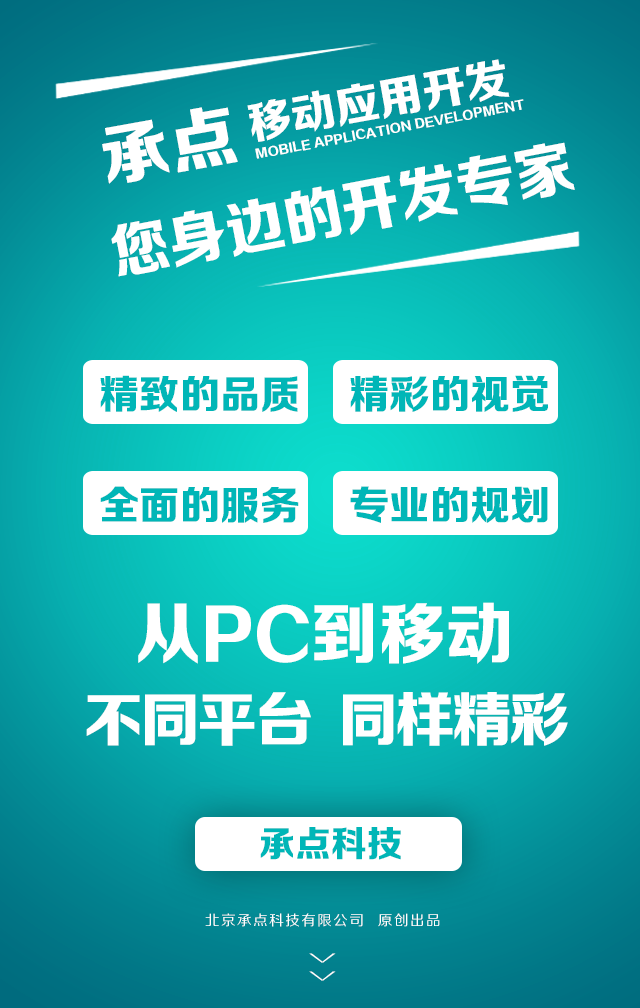
<style>
.page{position:relative;width:640px;height:1008px}
.page>*{position:absolute;margin:0}
.t1{font:43.9px "FZZDHJW--GB1-0";letter-spacing:0.005em;color:#ffffff;text-transform:uppercase}
.t2{font:12px "FZZDHJW--GB1-0";letter-spacing:0.005em;color:#ffffff;text-transform:uppercase}
.t3{font:67.7px "FZZDHJW--GB1-0";letter-spacing:0.005em;color:#ffffff;text-transform:uppercase}
.t4{font:59.4px "FZZDHJW--GB1-0";letter-spacing:0.005em;color:#ffffff;text-transform:uppercase}
.t5{font:40px "FZZDHJW--GB1-0";color:#00b6b7;text-transform:uppercase}
.t6{font:66.9px "FZZDHJW--GB1-0";color:#ffffff;text-transform:uppercase}
.t7{font:59.4px "FZZDHJW--GB1-0";letter-spacing:-0.05em;color:#ffffff;text-transform:uppercase}
.t8{font:36px "FZZDHJW--GB1-0";letter-spacing:0.005em;color:#00b6b7;text-transform:uppercase}
.t9{font:14.2px "FZZHJW--GB1-0";letter-spacing:0.1em;color:#ffffff;text-transform:uppercase}
.t10{font:36.8px "FZZXHJW--GB1-0";letter-spacing:0.5em;color:#ffffff;text-transform:uppercase;scale:0.44 1}
</style>
<div class="page">
<p class="t1" style="left:247px;top:59px;width:263px;height:83px;rotate:-10deg">移动应用开发</p>
<p class="t2" style="left:255px;top:99px;width:269px;height:60px;rotate:-11deg">Mobile application development</p>
<p class="t3" style="left:102px;top:107px;width:136px;height:77px;rotate:-10deg">承点</p>
<p class="t4" style="left:111px;top:142px;width:464px;height:135px;rotate:-11deg">您身边的开发专家</p>
<p class="t5" style="left:100px;top:375px;width:198px;height:37px">精致的品质</p>
<p class="t5" style="left:350px;top:375px;width:198px;height:37px">精彩的视觉</p>
<p class="t5" style="left:100px;top:486px;width:199px;height:37px">全面的服务</p>
<p class="t5" style="left:350px;top:486px;width:198px;height:37px">专业的规划</p>
<p class="t6" style="left:138px;top:602px;width:371px;height:62px">从PC到移动</p>
<p class="t7" style="left:86px;top:692px;width:482px;height:54px">不同平台  同样精彩</p>
<p class="t8" style="left:260px;top:827px;width:141px;height:33px">承点科技</p>
<p class="t9" style="left:205px;top:913px;width:235px;height:14px">北京承点科技有限公司  原创出品</p>
<p class="t10" style="left:309px;top:953px;width:27px;height:28px;rotate:90deg">&gt;&gt;</p>
</div>
